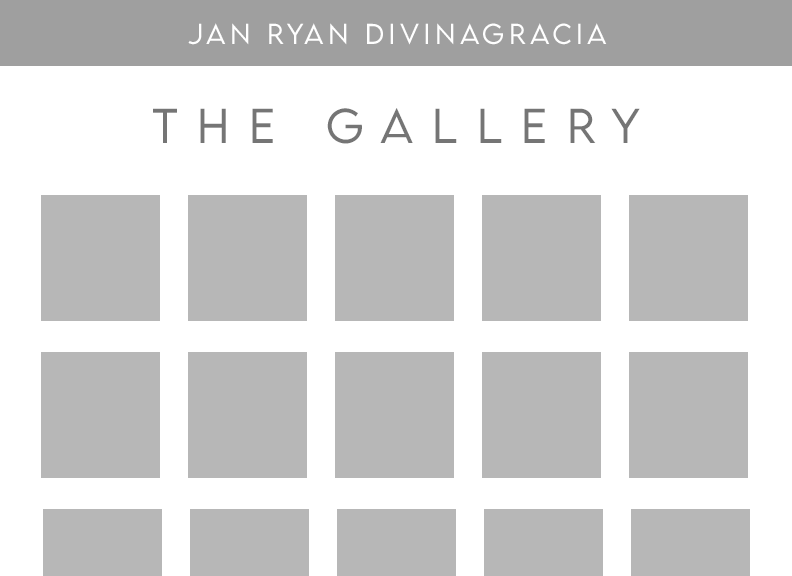
<style>
.page{position:relative;width:792px;height:576px;background:#ffffff}
.page>*{position:absolute;margin:0}
.t1{font:25.6px "LEMONMILK-Light";letter-spacing:0.18em;color:#ffffff}
.t2{font:43.6px "LEMONMILK-Light";letter-spacing:0.44em;color:#757575}
</style>
<div class="page">
<p class="t1" style="left:188px;top:23px;width:419px;height:22px">Jan Ryan Divinagracia</p>
<p class="t2" style="left:153px;top:108px;width:487px;height:36px">The Gallery</p>
</div>
